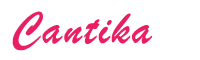
<style>
.page{position:relative;width:200px;height:60px;background:#ffffff}
.page>*{position:absolute;margin:0}
.t1{font:48px "BrushScriptMT";letter-spacing:0.05em;color:#e91e63}
</style>
<div class="page">
<p class="t1" style="left:12px;top:11px;width:140px;height:40px">Cantika</p>
</div>
